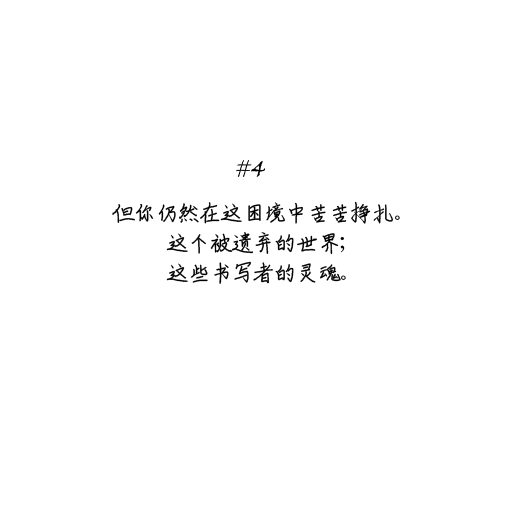
<style>
.page{position:relative;width:512px;height:512px;background:#ffffff}
.page>*{position:absolute;margin:0}
.t1{font:24px/30px "ShouShuti";letter-spacing:-0.1em;color:#000000}
</style>
<div class="page">
<p class="t1" style="left:112px;top:201px;width:288px;height:83px;text-align:center">但你仍然在这困境中苦苦挣扎。<br>这个被遗弃的世界；<br>这些书写者的灵魂。</p>
</div>
